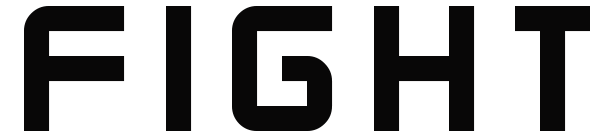
<style>
.page{position:relative;width:615px;height:137px;background:#ffffff}
.page>*{position:absolute;margin:0}
.t1{font:200px "KenVector-Future-Thin";color:#080707}
</style>
<div class="page">
<p class="t1" style="left:24px;top:6px;width:566px;height:125px">FIGHT</p>
</div>
